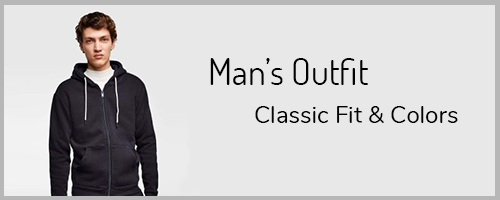
<style>
.page{position:relative;width:500px;height:200px;background:#e8e8e8}
.page>*{position:absolute;margin:0}
.t1{font:36px "Dosis-Regular";color:#000000}
.t2{font:24px "Nunito-Regular";color:#000000}
</style>
<div class="page">
<p class="t1" style="left:210px;top:58px;width:158px;height:27px">Man’s Outfit</p>
<p class="t2" style="left:255px;top:106px;width:203px;height:17px">Classic Fit &amp; Colors</p>
</div>
